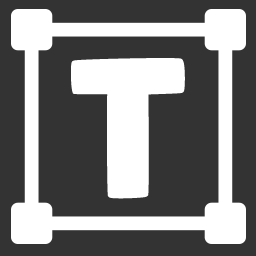
<style>
.page{position:relative;width:256px;height:256px;background:#333333}
.page>*{position:absolute;margin:0}
.t1{font:190px "MikadoBold";color:#ffffff;font-weight:bold;scale:1.05 1}
</style>
<div class="page">
<p class="t1" style="left:71px;top:58px;width:114px;height:141px">T</p>
</div>
